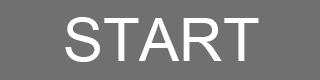
<style>
.page{position:relative;width:320px;height:80px;background:#707070}
.page>*{position:absolute;margin:0}
.t1{font:60px "ArialMT";color:#ffffff}
</style>
<div class="page">
<p class="t1" style="left:65px;top:17px;width:194px;height:45px">START</p>
</div>
